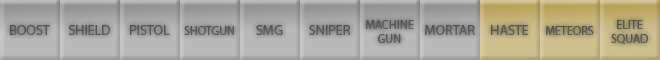
<style>
.page{position:relative;width:660px;height:60px}
.page>*{position:absolute;margin:0}
.t1{font:14px "MyriadPro-Regular";color:#575757}
.t2{font:14px "MyriadPro-Regular";color:#595959}
.t3{font:12px "MyriadPro-Regular";color:#585858}
.t4{font:14px "MyriadPro-Regular";color:#5a5a5a}
.t5{font:12px "MyriadPro-Regular";color:#575757}
.t6{font:12px "MyriadPro-Regular";color:#595959}
.t7{font:12px "MyriadPro-Regular";color:#565656}
</style>
<div class="page">
<p class="t1" style="left:10px;top:25px;width:40px;height:10px">BOOST</p>
<p class="t2" style="left:68px;top:25px;width:42px;height:10px">SHIELD</p>
<p class="t1" style="left:130px;top:25px;width:40px;height:10px">PISTOL</p>
<p class="t3" style="left:184px;top:26px;width:50px;height:9px">SHOTGUN</p>
<p class="t2" style="left:256px;top:25px;width:27px;height:10px">SMG</p>
<p class="t4" style="left:309px;top:25px;width:42px;height:10px">SNIPER</p>
<p class="t5" style="left:366px;top:20px;width:48px;height:23px;text-align:center">MACHINE<br>GUN</p>
<p class="t2" style="left:425px;top:25px;width:50px;height:10px">MORTAR</p>
<p class="t1" style="left:491px;top:25px;width:38px;height:10px">HASTE</p>
<p class="t6" style="left:546px;top:26px;width:48px;height:9px">METEORS</p>
<p class="t7" style="left:611px;top:20px;width:37px;height:24px;text-align:center">ELITE<br>SQUAD</p>
</div>
